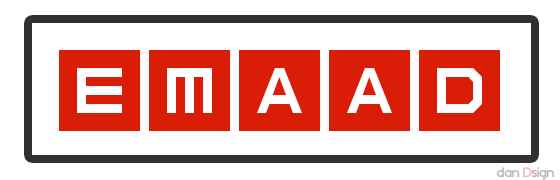
<style>
.page{position:relative;width:560px;height:180px;background:#ffffff}
.page>*{position:absolute;margin:0}
.t1{font:144px "Inversionz";color:#d91d06}
.t2{font:14px "BlissfulThinking";color:#b8b8b8}
</style>
<div class="page">
<p class="t1" style="left:59px;top:50px;width:441px;height:81px">emaad</p>
<p class="t2" style="left:496px;top:167px;width:58px;height:13px">dan Dsign</p>
</div>
